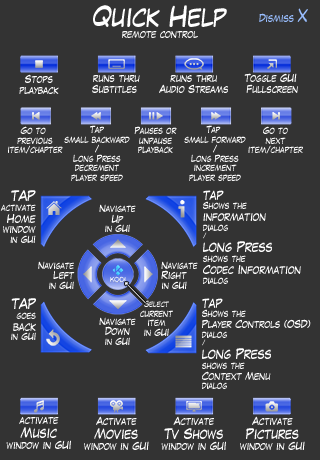
<style>
.page{position:relative;width:320px;height:460px;background:#333333}
.page>*{position:absolute;margin:0}
.t1{font:9px "LaffayetteComicPro";color:#ffffff}
.t2{font:24px "LaffayetteComicPro";color:#ffffff}
.t3{font:9px "LaffayetteComicPro";color:#99beff}
.t4{font:15px "LaffayetteComicPro";color:#99beff}
.t5{font:8px "LaffayetteComicPro";color:#ffffff}
.t6{font:12px "LaffayetteComicPro";color:#ffffff}
.t7{font:10px "LaffayetteComicPro";color:#ffffff}
.t8{font:6px "LaffayetteComicPro";color:#ffffff}
.t9{font:7px "LaffayetteComicPro";color:#ffffff}
</style>
<div class="page">
<p class="t1" style="left:93px;top:5px;width:134px;height:33px;text-align:center"><span class="t2">Quick Help<br></span>remote control</p>
<p class="t3" style="left:259px;top:8px;width:49px;height:14px">Dismiss <span class="t4">X</span></p>
<p class="t1" style="left:19px;top:74px;width:40px;height:20px;text-align:center">Stops<br>playback</p>
<p class="t1" style="left:92px;top:75px;width:48px;height:18px;text-align:center">runs thru<br>Subtitles</p>
<p class="t1" style="left:159px;top:75px;width:69px;height:18px;text-align:center">runs thru<br>Audio Streams</p>
<p class="t1" style="left:244px;top:73px;width:54px;height:20px;text-align:center">Toggle GUI <br>Fullscreen</p>
<p class="t5" style="left:8px;top:126px;width:55px;height:28px;text-align:center">Go to <br>previous<br>item/chapter</p>
<p class="t5" style="left:64px;top:125px;width:66px;height:56px;text-align:center">Tap<br>small backward<br>/<br>Long Press<br>decrement<br>player speed</p>
<p class="t5" style="left:134px;top:126px;width:43px;height:27px;text-align:center">Pauses or<br>unpause<br>playback</p>
<p class="t5" style="left:184px;top:125px;width:62px;height:56px;text-align:center">Tap <br>small forward<br>/<br>Long Press<br>increment<br>player speed</p>
<p class="t5" style="left:248px;top:126px;width:55px;height:28px;text-align:center">Go to<br>next<br>item/chapter</p>
<p class="t5" style="left:0px;top:190px;width:36px;height:53px;text-align:right"><span class="t6">TAP<br></span>activate<br><span class="t7">Home<br></span><span class="t1">window<br></span>in GUI</p>
<p class="t7" style="left:203px;top:190px;width:98px;height:94px"><span class="t6">tap <br></span><span class="t5">Shows the <br></span>information <br><span class="t5">dialog<br></span><span class="t8">/<br></span><span class="t6">long Press<br></span><span class="t5">shows the<br></span>Codec Information<br><span class="t5">dialog</span></p>
<p class="t5" style="left:99px;top:204px;width:37px;height:28px;text-align:center">Navigate<br><span class="t1">Up<br></span>in GUI</p>
<p class="t5" style="left:38px;top:261px;width:37px;height:28px;text-align:right">Navigate<br><span class="t1">Left<br></span>in GUI</p>
<p class="t5" style="left:161px;top:261px;width:37px;height:28px">Navigate<br><span class="t1">Right<br></span>in GUI</p>
<p class="t5" style="left:11px;top:298px;width:25px;height:42px;text-align:right"><span class="t6">TAP<br></span>goes<br><span class="t7">back<br></span>in GUI</p>
<p class="t5" style="left:140px;top:300px;width:33px;height:36px;text-align:center"><span class="t9">Select<br></span>current<br>item<br>in GUI</p>
<p class="t1" style="left:202px;top:298px;width:109px;height:91px"><span class="t6">tap<br></span><span class="t5">Shows the <br></span>Player Controls (OSD)<br><span class="t5">dialog<br></span><span class="t8">/<br></span><span class="t6">long Press<br></span><span class="t5">shows the<br></span>Context Menu<br><span class="t5">dialog</span></p>
<p class="t5" style="left:99px;top:317px;width:37px;height:28px;text-align:center">Navigate<br><span class="t1">Down<br></span>in GUI</p>
<p class="t1" style="left:6px;top:417px;width:65px;height:32px;text-align:center">activate<br><span class="t6">Music<br></span>window in GUI</p>
<p class="t1" style="left:84px;top:416px;width:65px;height:34px;text-align:center">Activate<br><span class="t6">Movies<br></span>window in GUI</p>
<p class="t1" style="left:161px;top:416px;width:65px;height:34px;text-align:center">Activate<br><span class="t6">Tv Shows<br></span>window in GUI</p>
<p class="t1" style="left:240px;top:416px;width:65px;height:34px;text-align:center">Activate<br><span class="t6">Pictures<br></span>window in GUI</p>
</div>
